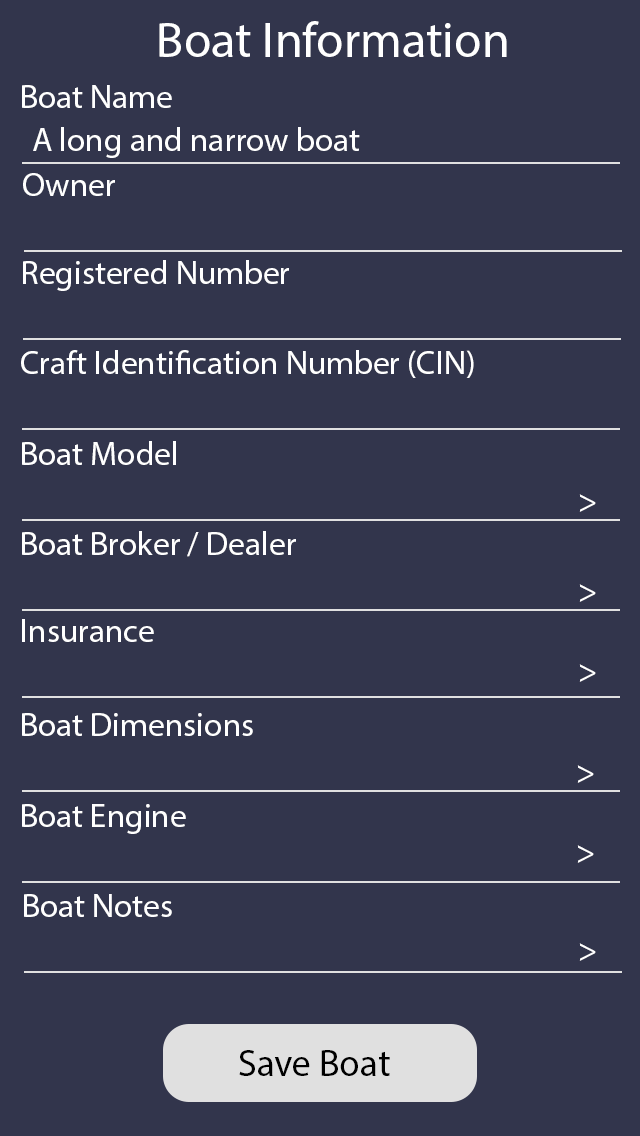
<style>
.page{position:relative;width:640px;height:1136px;background:#32354c}
.page>*{position:absolute;margin:0}
.t1{font:50px "MyriadPro-Regular";color:#ffffff}
.t2{font:33.3px "MyriadPro-Regular";color:#ffffff}
.t3{font:37.5px "MyriadPro-Regular";color:#000000}
</style>
<div class="page">
<p class="t1" style="left:159px;top:21px;width:348px;height:36px">Boat Information</p>
<p class="t2" style="left:22px;top:85px;width:150px;height:23px">Boat Name</p>
<p class="t2" style="left:33px;top:127px;width:327px;height:31px">A long and narrow boat</p>
<p class="t2" style="left:23px;top:173px;width:92px;height:23px">Owner</p>
<p class="t2" style="left:23px;top:260px;width:266px;height:31px">Registered Number</p>
<p class="t2" style="left:21px;top:350px;width:453px;height:28px">Craft Identification Number (CIN)</p>
<p class="t2" style="left:22px;top:441px;width:154px;height:24px">Boat Model</p>
<p class="t2" style="left:579px;top:494px;width:17px;height:18px">&gt;</p>
<p class="t2" style="left:22px;top:531px;width:274px;height:26px">Boat Broker / Dealer</p>
<p class="t2" style="left:579px;top:584px;width:17px;height:18px">&gt;</p>
<p class="t2" style="left:22px;top:619px;width:132px;height:23px">Insurance</p>
<p class="t2" style="left:579px;top:664px;width:17px;height:18px">&gt;</p>
<p class="t2" style="left:22px;top:713px;width:231px;height:23px">Boat Dimensions</p>
<p class="t2" style="left:577px;top:765px;width:17px;height:18px">&gt;</p>
<p class="t2" style="left:22px;top:804px;width:164px;height:30px">Boat Engine</p>
<p class="t2" style="left:577px;top:845px;width:17px;height:18px">&gt;</p>
<p class="t2" style="left:24px;top:894px;width:148px;height:23px">Boat Notes</p>
<p class="t2" style="left:579px;top:943px;width:17px;height:18px">&gt;</p>
<p class="t3" style="left:239px;top:1050px;width:151px;height:26px">Save Boat</p>
</div>
